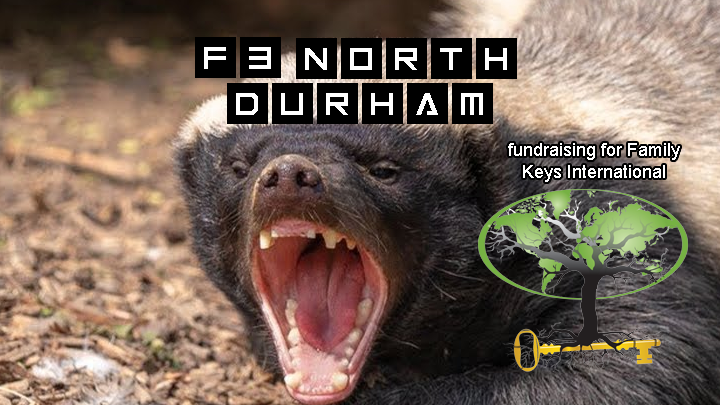
<style>
.page{position:relative;width:720px;height:405px}
.page>*{position:absolute;margin:0}
.t1{font:72px "Inversionz";color:#000000}
.t2{font:18px "ArialMT";color:#ffffff}
</style>
<div class="page">
<p class="t1" style="left:195px;top:37px;width:86px;height:41px">f3</p>
<p class="t1" style="left:296px;top:38px;width:221px;height:41px">north</p>
<p class="t1" style="left:227px;top:83px;width:266px;height:41px">durham</p>
<p class="t2" style="left:508px;top:143px;width:172px;height:39px;text-align:center">fundraising for Family Keys International</p>
</div>
